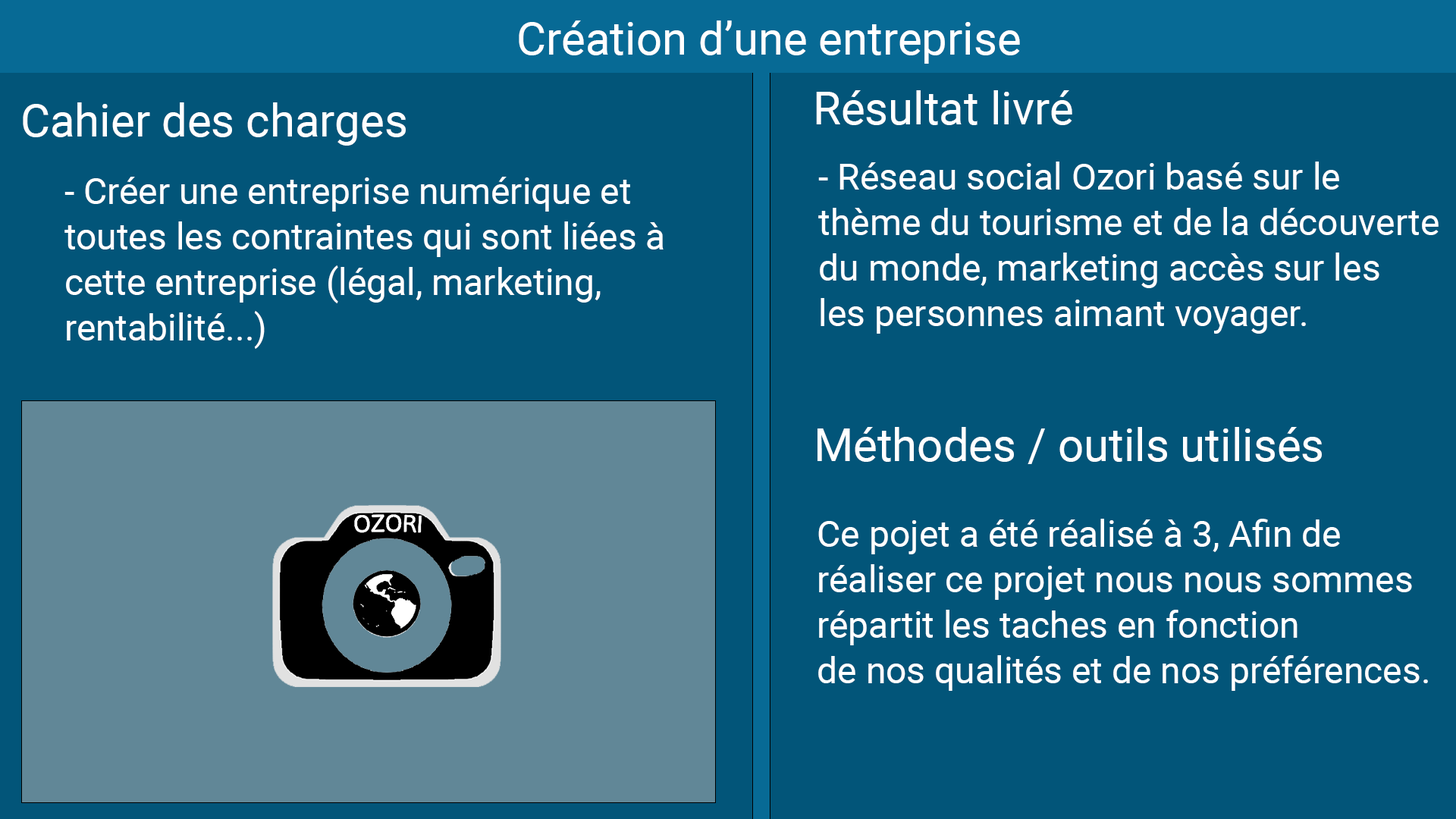
<style>
.page{position:relative;width:1456px;height:819px;background:#025579}
.page>*{position:absolute;margin:0}
.t1{font:45.5px "Roboto-Regular";color:#ffffff}
.t2{font:36.4px/45.5px "Roboto-Regular";color:#ffffff}
</style>
<div class="page">
<p class="t1" style="left:519px;top:20px;width:501px;height:44px">Création d’une entreprise</p>
<p class="t1" style="left:816px;top:90px;width:256px;height:35px">Résultat livré</p>
<p class="t1" style="left:23px;top:102px;width:383px;height:44px">Cahier des charges</p>
<p class="t2" style="left:818px;top:162px;width:621px;height:172px">- Réseau social Ozori basé sur le <br>thème du tourisme et de la découverte<br>du monde, marketing accès sur les <br>les personnes aimant voyager.</p>
<p class="t2" style="left:64px;top:177px;width:600px;height:172px">- Créer une entreprise numérique et <br>toutes les contraintes qui sont liées à <br>cette entreprise (légal, marketing,<br>rentabilité...)</p>
<p class="t1" style="left:817px;top:427px;width:505px;height:37px">Méthodes / outils utilisés</p>
<p class="t2" style="left:818px;top:519px;width:610px;height:172px">Ce pojet a été réalisé à 3, Afin de <br>réaliser ce projet nous nous sommes<br>répartit les taches en fonction<br>de nos qualités et de nos préférences.</p>
</div>
